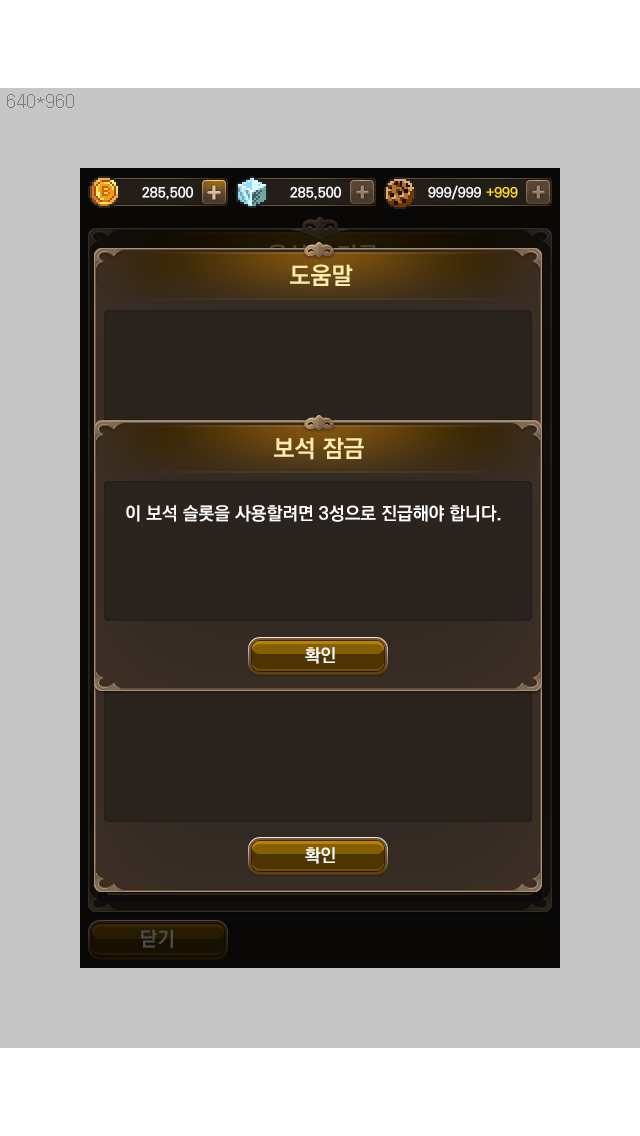
<style>
.page{position:relative;width:640px;height:1136px;background:#c6c6c6}
.page>*{position:absolute;margin:0}
.t1{font:24px "KoPubDotumBold";color:#ffedab}
.t2{font:18px "KoPubDotumBold";color:#ffffff}
</style>
<div class="page">
<p class="t1" style="left:290px;top:264px;width:63px;height:22px">도움말</p>
<p class="t1" style="left:274px;top:437px;width:90px;height:23px">보석 잠금</p>
<p class="t2" style="left:126px;top:505px;width:375px;height:17px">이 보석 슬롯을 사용할려면 3성으로 진급해야 합니다.</p>
<p class="t2" style="left:305px;top:847px;width:30px;height:17px">확인</p>
</div>
